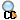
<style>
.page{position:relative;width:20px;height:20px;background:#fcfaf9}
.page>*{position:absolute;margin:0}
.t1{font:11px "BellGothicStd-Bold";letter-spacing:-0.1em;color:#000000;font-weight:bold}
</style>
<div class="page">
<p class="t1" style="left:4px;top:11px;width:12px;height:8px">CC</p>
</div>
